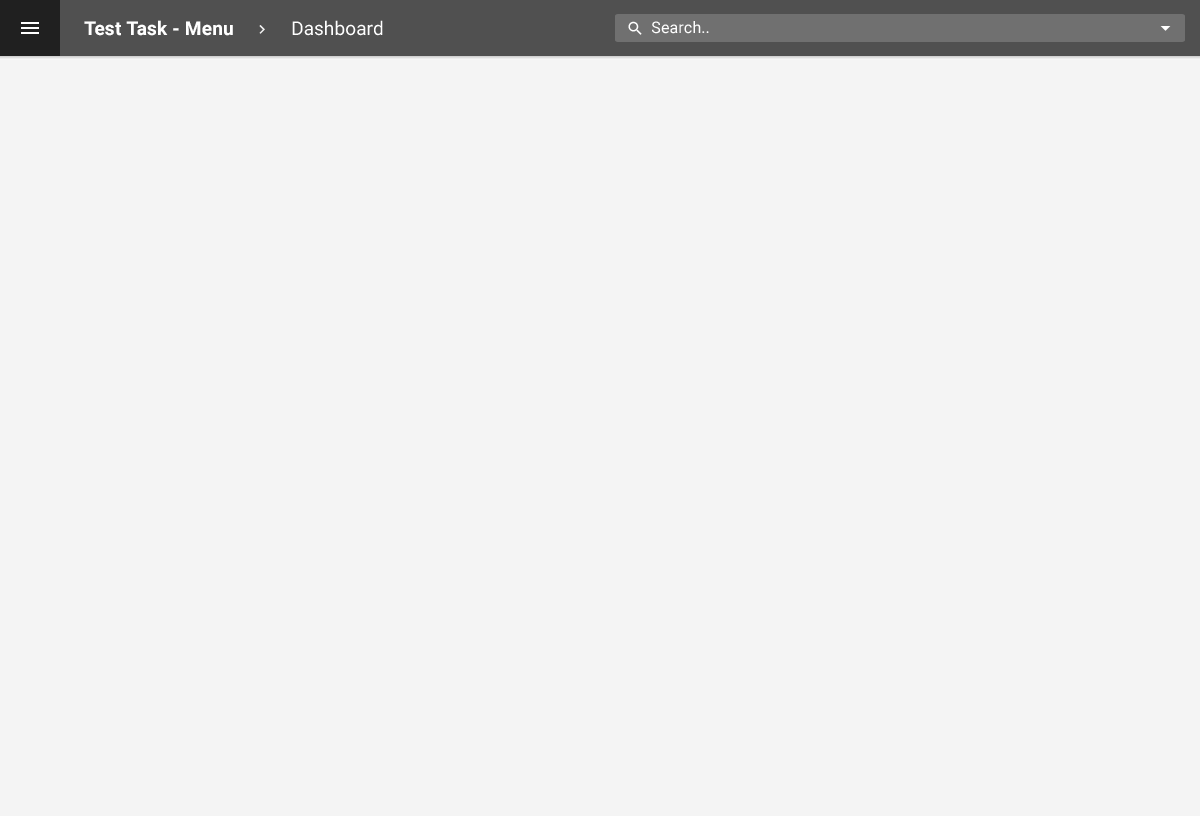
<style>
.page{position:relative;width:1200px;height:816px;background:#f4f4f4}
.page>*{position:absolute;margin:0}
.t1{font:19px "Roboto-Bold";letter-spacing:0.01em;color:#ffffff}
.t2{font:19px "Roboto-Regular";letter-spacing:0.01em;color:#ffffff}
.t3{font:16px "Roboto-Regular";letter-spacing:0.01em;color:#ffffff}
</style>
<div class="page">
<p class="t1" style="left:84px;top:20px;width:149px;height:16px">Test Task - Menu</p>
<p class="t2" style="left:292px;top:20px;width:91px;height:16px">Dashboard</p>
<p class="t3" style="left:652px;top:21px;width:57px;height:13px">Search..</p>
</div>
